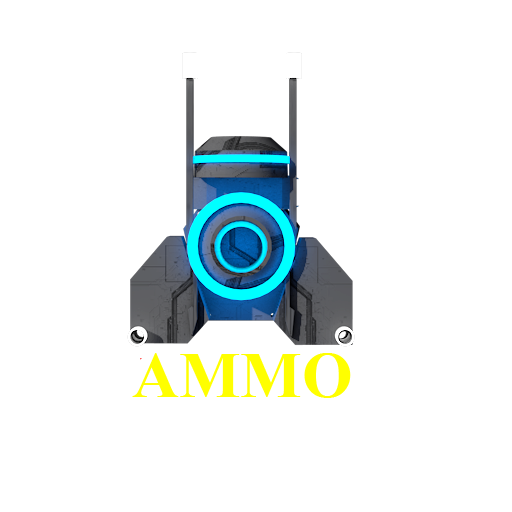
<style>
.page{position:relative;width:512px;height:512px;background:#ffffff}
.page>*{position:absolute;margin:0}
.t1{font:65px "TimesNewRomanPS-BoldMT";color:#ffff00}
</style>
<div class="page">
<p class="t1" style="left:132px;top:353px;width:219px;height:45px">AMMO</p>
</div>
